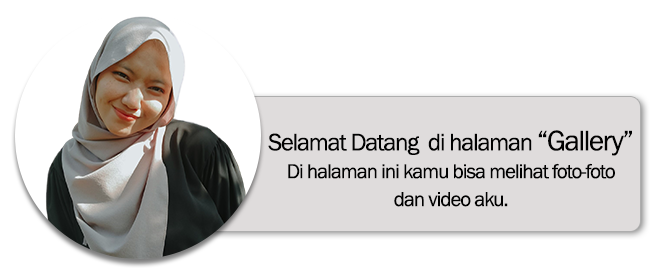
<style>
.page{position:relative;width:657px;height:271px;background:#ffffff}
.page>*{position:absolute;margin:0}
.t1{font:20.8px/27.9px "FranklinGothic-Book";letter-spacing:-0.05em;color:#010101}
.t2{font:24.6px/27.9px "FranklinGothic-Book";letter-spacing:-0.05em;color:#010101}
.t3{font:29.2px/27.9px "FranklinGothic-Book";letter-spacing:-0.05em;color:#010101}
</style>
<div class="page">
<p class="t1" style="left:268px;top:130px;width:364px;height:77px;text-align:center"><span class="t2">Selamat Datang  di halaman </span><span class="t3">“Gallery”<br></span>Di halaman ini kamu bisa melihat foto-foto<br>dan video aku.</p>
</div>
